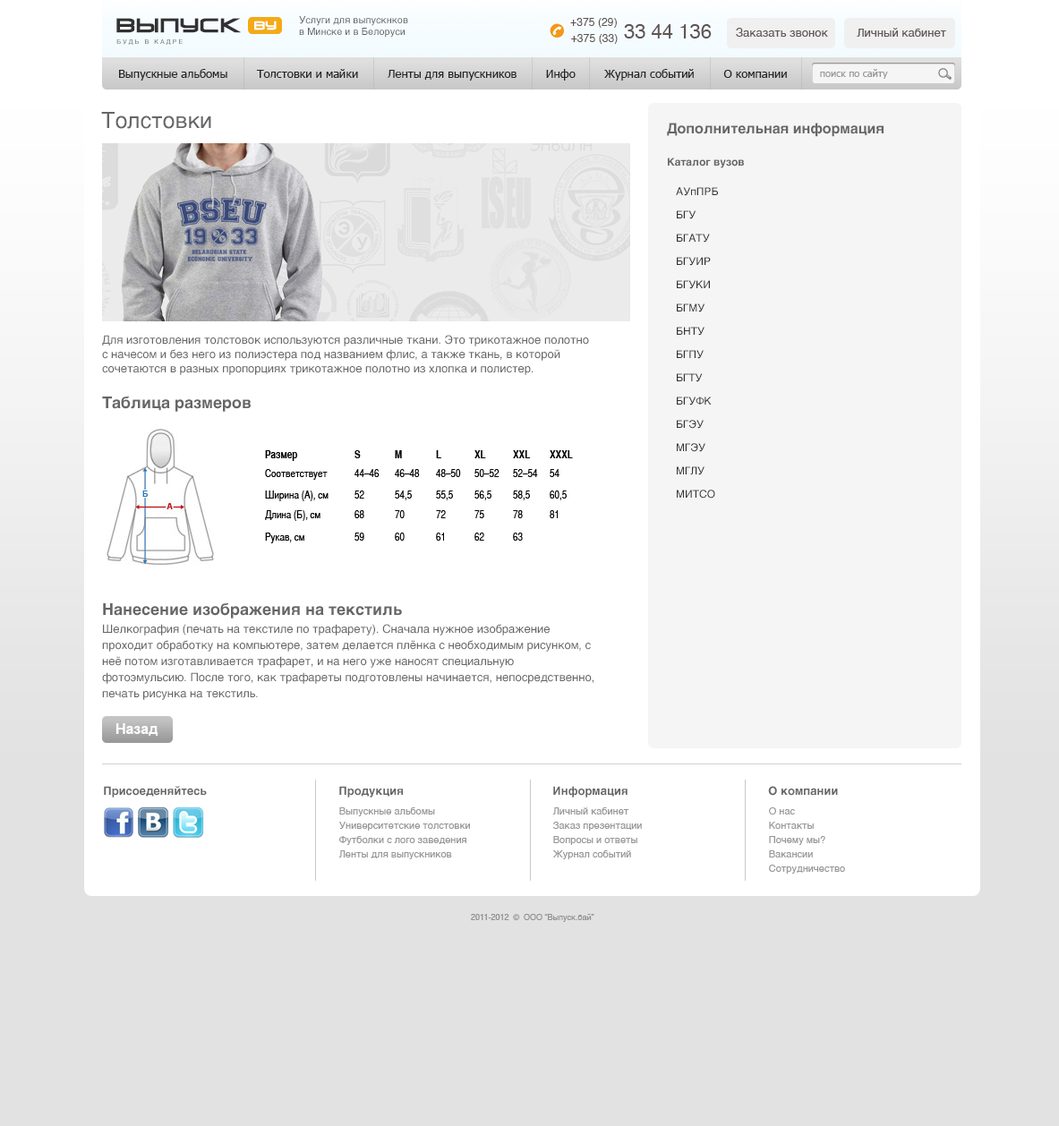
<style>
.page{position:relative;width:1059px;height:1126px;background:#ffffff}
.page>*{position:absolute;margin:0}
.t1{font:18.8px "VenusRisingCyrillic";letter-spacing:0.01em;color:#313131;font-weight:bold}
.t2{font:9.8px "Helvetica";color:#616161}
.t3{font:10.7px "Helvetica";letter-spacing:0.01em;color:#5f5555}
.t4{font:11.3px "VenusRisingCyrillic";letter-spacing:0.01em;color:#ffffff;font-weight:bold}
.t5{font:19.7px "Helvetica";color:#5f5555}
.t6{font:11.6px "Helvetica";color:#5f5555}
.t7{font:6.3px "Helvetica";letter-spacing:0.3em;color:#6d6d6d;text-transform:uppercase}
.t8{font:11.6px "Tahoma";color:#242424}
.t9{font:9.8px "Tahoma";color:#979999}
.t10{font:22.4px "Helvetica";color:#666666}
.t11{font:10.7px/23.3px "Helvetica";color:#323232}
.t12{font:14.3px "Helvetica-Bold";color:#666666}
.t13{font:10.7px/32.2px "Helvetica-Bold";color:#666666}
.t14{font:10.7px/29.5px "Helvetica";color:#323232}
.t15{font:11.6px "Helvetica";color:#666666}
.t16{font:11.6px/21.5px "Helvetica";color:#666666}
.t17{font:16.1px "Helvetica-Bold";color:#666666}
.t18{font:11.6px/16.1px "Helvetica";color:#666666}
.t19{font:14.3px "Arial-BoldMT";color:#fdfdfe}
.t20{font:11.6px "Helvetica-Bold";color:#666666}
.t21{font:9.8px/14.3px "Helvetica";color:#979797}
.t22{font:8.1px "Helvetica";color:#909090}
</style>
<div class="page">
<p class="t1" style="left:116px;top:18px;width:125px;height:15px">ВЫпуск</p>
<p class="t2" style="left:299px;top:16px;width:109px;height:22px">Услуги для выпускнков<br>в Минске и в Белоруси</p>
<p class="t3" style="left:570px;top:18px;width:47px;height:10px">+375 (29)</p>
<p class="t4" style="left:254px;top:21px;width:23px;height:9px">by</p>
<p class="t5" style="left:624px;top:24px;width:88px;height:14px">33 44 136</p>
<p class="t6" style="left:736px;top:28px;width:210px;height:9px">Заказать звонок         Личный кабинет</p>
<p class="t7" style="left:116px;top:39px;width:67px;height:6px">будь в кадре</p>
<p class="t3" style="left:571px;top:34px;width:47px;height:10px">+375 (33)</p>
<p class="t8" style="left:119px;top:69px;width:668px;height:12px">Выпускные альбомы        Толстовки и майки        Ленты для выпускников        Инфо        Журнал событий        О компании</p>
<p class="t9" style="left:820px;top:69px;width:68px;height:10px">поиск по сайту</p>
<p class="t10" style="left:101px;top:112px;width:110px;height:17px">Толстовки</p>
<p class="t11" style="left:667px;top:123px;width:216px;height:376px"><span class="t12">Дополнительная информация<br></span><span class="t13">Каталог вузов<br>   </span><span class="t14">АУпПРБ<br> </span>  БГУ<br>   БГАТУ<br>   БГУИР<br>   БГУКИ<br>   БГМУ<br>   БНТУ<br>   БГПУ<br>   БГТУ<br>   БГУФК<br>   БГЭУ<br>   МГЭУ<br>   МГЛУ<br>   МИТСО</p>
<p class="t15" style="left:102px;top:335px;width:487px;height:40px"><span class="t16">Для изготовления толстовок используются различные </span>ткани. Это трикотажное полотно <br>с начесом и без него из полиэстера под названием флис, а также ткань, в которой <br>сочетаются в разных пропорциях трикотажное полотно из хлопка и полистер.</p>
<p class="t17" style="left:102px;top:397px;width:149px;height:15px">Таблица размеров</p>
<p class="t17" style="left:103px;top:603px;width:299px;height:16px">Нанесение изображения на текстиль</p>
<p class="t18" style="left:102px;top:624px;width:491px;height:76px">Шелкография (печать на текстиле по трафарету). Сначала нужное изображение проходит обработку на компьютере, затем делается плёнка с необходимым рисунком, с неё потом изготавливается трафарет, и на него уже наносят специальную фотоэмульсию. После того, как трафареты подготовлены начинается, непосредственно, печать рисунка на текстиль.</p>
<p class="t19" style="left:115px;top:723px;width:43px;height:13px">Назад</p>
<p class="t20" style="left:104px;top:786px;width:103px;height:12px">Присоеденяйтесь</p>
<p class="t20" style="left:339px;top:786px;width:64px;height:12px">Продукция</p>
<p class="t20" style="left:553px;top:786px;width:74px;height:12px">Информация</p>
<p class="t20" style="left:768px;top:786px;width:70px;height:10px">О компании</p>
<p class="t21" style="left:338px;top:807px;width:132px;height:52px">Выпускные альбомы<br>Университетские толстовки<br>Футболки с лого заведения<br>Ленты для выпускников</p>
<p class="t21" style="left:552px;top:807px;width:90px;height:52px">Личный кабинет<br>Заказ презентации<br>Вопросы и ответы<br>Журнал событий</p>
<p class="t21" style="left:769px;top:807px;width:76px;height:67px">О нас<br>Контакты<br>Почему мы? <br>Вакансии<br>Сотрудничество</p>
<p class="t22" style="left:471px;top:914px;width:123px;height:8px">2011-2012  ©  ООО “Выпуск.бай”</p>
</div>
